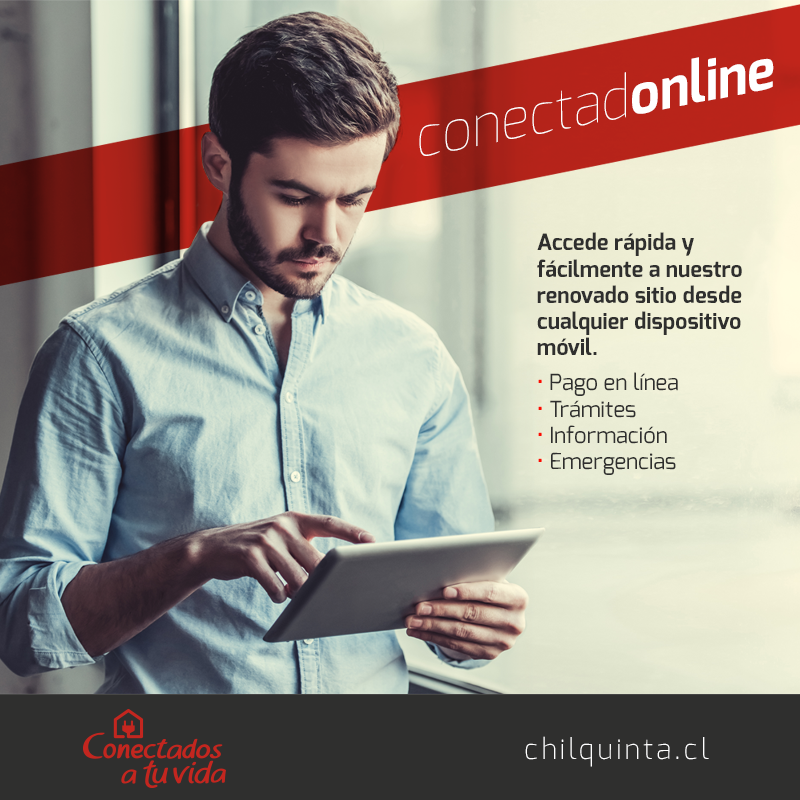
<style>
.page{position:relative;width:800px;height:800px}
.page>*{position:absolute;margin:0}
.t1{font:57.2px "Exo-Thin";color:#ffffff;scale:0.94 1}
.t2{font:57.2px "Exo-Bold";color:#ffffff;scale:0.94 1}
.t3{font:22.2px/26.2px "Exo-Bold";color:#2f2f2e}
.t4{font:22.2px/35.3px "Exo-Regular";color:#fb0c00}
.t5{font:22.2px/35.3px "Exo-Regular";color:#2f2f2e}
.t6{font:22.2px/31.4px "Exo-Regular";color:#2f2f2e}
.t7{font:22.2px/26.2px "Exo-Regular";color:#fb0c00}
.t8{font:22.2px/26.2px "Exo-Regular";color:#2f2f2e}
.t9{font:28px "Exo-ExtraLight";letter-spacing:0.12em;color:#ffffff}
</style>
<div class="page">
<p class="t1" style="left:419px;top:57px;width:355px;height:99px;rotate:-11deg">conectad<span class="t2">online</span></p>
<p class="t3" style="left:537px;top:232px;width:205px;height:243px">Accede rápida y <br>fácilmente a nuestro<br>renovado sitio desde<br>cualquier dispositivo<br>móvil.<br><span class="t4">• </span><span class="t5">Pa</span><span class="t6">go en línea<br></span><span class="t7">• </span><span class="t8">Trámites<br></span><span class="t7">•</span><span class="t8"> Información<br></span><span class="t7">•</span><span class="t8"> Emergencias</span></p>
<p class="t9" style="left:525px;top:736px;width:184px;height:31px">chilquinta.cl</p>
</div>
